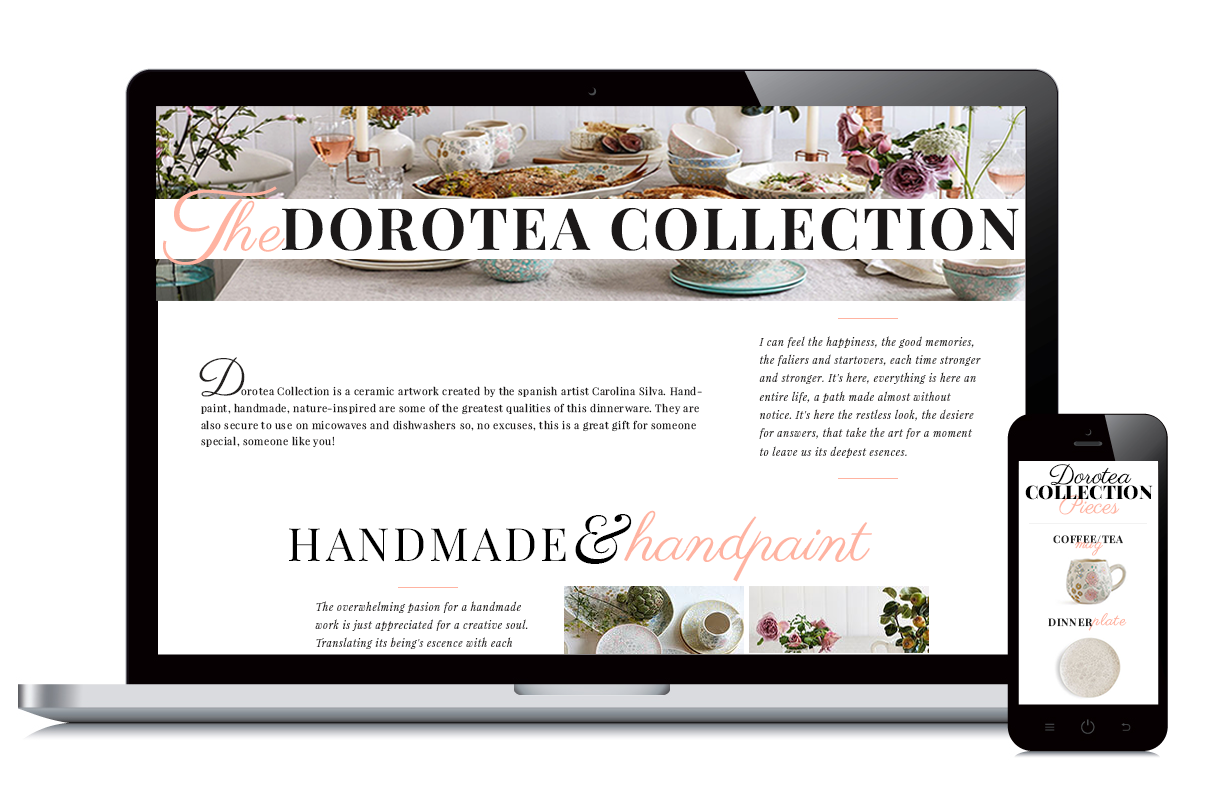
<style>
.page{position:relative;width:1207px;height:801px;background:#ffffff}
.page>*{position:absolute;margin:0}
.t1{font:66.7px "Parisienne-Regular";letter-spacing:0.05em;color:#ffb3a1}
.t2{font:58.3px "PlayfairDisplay-Bold";letter-spacing:0.05em;color:#1b1818}
.t3{font:10.4px/18.3px "PlayfairDisplay-Italic";letter-spacing:0.05em;color:#242120}
.t4{font:50px "Parisienne-Regular";letter-spacing:0.05em;color:#242120}
.t5{font:10.4px/16.7px "PlayfairDisplay-Regular";letter-spacing:0.05em;color:#1b1818}
.t6{font:26.7px "Parisienne-Regular";color:#000000}
.t7{font:18.8px "PlayfairDisplay-Black";color:#000000}
.t8{font:66.7px "Parisienne-Regular";color:#ffb3a1}
.t9{font:66.7px "PlayfairDisplay-Italic";color:#000000}
.t10{font:45.8px "PlayfairDisplay-Regular";letter-spacing:0.075em;color:#000000}
.t11{font:10.4px "PlayfairDisplay-Bold";letter-spacing:0.05em;color:#212121}
.t12{font:16.7px "Parisienne-Regular";letter-spacing:0.05em;color:#ffb3a1}
</style>
<div class="page">
<p class="t1" style="left:223px;top:200px;width:62px;height:52px">he</p>
<p class="t2" style="left:282px;top:207px;width:737px;height:44px">DOROTEA COLLECTION</p>
<p class="t3" style="left:759px;top:336px;width:222px;height:122px">I can feel the happiness, the good memories, the faliers and startovers, each time stronger and stronger. It's here, everything is here an entire life, a path made almost without notice. It's here the restless look, the desiere for answers, that take the art for a moment to leave us its deepest esences.</p>
<p class="t4" style="left:199px;top:357px;width:46px;height:40px">D</p>
<p class="t5" style="left:201px;top:386px;width:501px;height:62px">orotea Collection is a ceramic artwork created by the spanish artist Carolina Silva. Handpaint, handmade, nature-inspired are some of the greatest qualities of this dinnerware. They are also secure to use on micowaves and dishwashers so, no excuses, this is a great gift for someone special, someone like you!</p>
<p class="t6" style="left:1049px;top:463px;width:83px;height:22px">Dorotea</p>
<p class="t7" style="left:1025px;top:485px;width:128px;height:15px">COLLECTION</p>
<p class="t8" style="left:624px;top:510px;width:248px;height:72px">handpaint</p>
<p class="t9" style="left:575px;top:514px;width:57px;height:50px">&amp;</p>
<p class="t10" style="left:289px;top:528px;width:277px;height:34px">HANDMADE</p>
<p class="t11" style="left:1053px;top:535px;width:70px;height:9px">COFFEE/TEA</p>
<p class="t12" style="left:1075px;top:541px;width:28px;height:15px">mug</p>
<p class="t3" style="left:315px;top:601px;width:213px;height:48px">The overwhelming pasion for a handmade work is just appreciated for a creative soul. Translating its being's escence with each</p>
<p class="t12" style="left:1088px;top:613px;width:39px;height:18px">plate</p>
<p class="t11" style="left:1048px;top:618px;width:45px;height:9px">DINNER</p>
</div>
